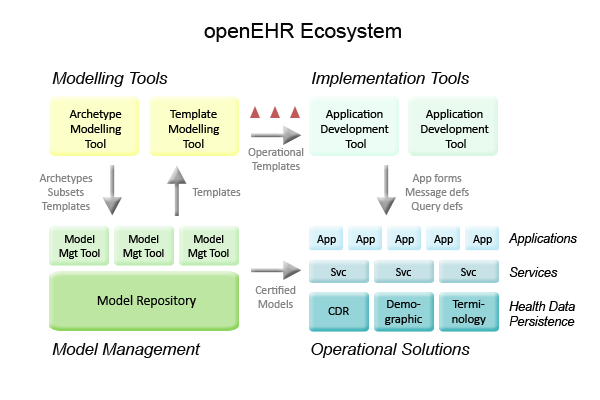
<style>
.page{position:relative;width:600px;height:400px;background:#ffffff}
.page>*{position:absolute;margin:0}
.t1{font:20.8px "ArialMT";color:#060606}
.t2{font:16.7px "Arial-ItalicMT";color:#060606}
.t3{font:12.5px "Calibri";color:#000000}
.t4{font:11.7px "Calibri";color:#848484}
.t5{font:12.5px "Arial-ItalicMT";color:#000000}
.t6{font:11.7px "Calibri";color:#000000}
.t7{font:13.8px "Calibri";color:#000000}
</style>
<div class="page">
<p class="t1" style="left:204px;top:23px;width:197px;height:19px">openEHR Ecosystem</p>
<p class="t2" style="left:52px;top:72px;width:116px;height:15px">Modelling Tools</p>
<p class="t2" style="left:312px;top:72px;width:157px;height:15px">Implementation Tools</p>
<p class="t3" style="left:69px;top:109px;width:53px;height:39px;text-align:center">Archetype<br>Modelling<br>Tool</p>
<p class="t3" style="left:169px;top:109px;width:51px;height:39px;text-align:center">Template<br>Modelling<br>Tool</p>
<p class="t3" style="left:321px;top:109px;width:68px;height:39px;text-align:center">Application<br>Development<br> Tool</p>
<p class="t3" style="left:421px;top:109px;width:68px;height:39px;text-align:center">Application<br>Development<br> Tool</p>
<p class="t4" style="left:248px;top:148px;width:56px;height:24px;text-align:center">Operational<br>Templates</p>
<p class="t4" style="left:39px;top:174px;width:54px;height:38px;text-align:center">Archetypes Subsets<br>Templates</p>
<p class="t4" style="left:405px;top:174px;width:64px;height:38px;text-align:center">App forms<br>Message defs<br>Query defs</p>
<p class="t4" style="left:192px;top:188px;width:49px;height:10px">Templates</p>
<p class="t5" style="left:508px;top:233px;width:69px;height:13px">Applications</p>
<p class="t6" style="left:59px;top:235px;width:41px;height:24px;text-align:center">Model<br>Mgt Tool</p>
<p class="t6" style="left:123px;top:235px;width:41px;height:24px;text-align:center">Model<br>Mgt Tool</p>
<p class="t6" style="left:188px;top:235px;width:41px;height:24px;text-align:center">Model<br>Mgt Tool</p>
<p class="t6" style="left:317px;top:235px;width:19px;height:10px">App</p>
<p class="t6" style="left:356px;top:235px;width:19px;height:10px">App</p>
<p class="t6" style="left:395px;top:235px;width:19px;height:10px">App</p>
<p class="t6" style="left:434px;top:235px;width:19px;height:10px">App</p>
<p class="t6" style="left:473px;top:235px;width:19px;height:10px">App</p>
<p class="t6" style="left:331px;top:268px;width:15px;height:8px">Svc</p>
<p class="t6" style="left:396px;top:268px;width:15px;height:8px">Svc</p>
<p class="t6" style="left:461px;top:268px;width:15px;height:8px">Svc</p>
<p class="t5" style="left:509px;top:267px;width:49px;height:10px">Services</p>
<p class="t4" style="left:255px;top:286px;width:41px;height:22px;text-align:center">Certified Models</p>
<p class="t7" style="left:97px;top:295px;width:99px;height:13px">Model Repository</p>
<p class="t3" style="left:385px;top:300px;width:37px;height:25px;text-align:center">Demo-<br>graphic</p>
<p class="t3" style="left:452px;top:300px;width:34px;height:25px;text-align:center">Termi-<br>nology</p>
<p class="t5" style="left:509px;top:301px;width:66px;height:25px">Health Data<br>Persistence</p>
<p class="t3" style="left:328px;top:307px;width:21px;height:8px">CDR</p>
<p class="t2" style="left:52px;top:343px;width:149px;height:15px">Model Management</p>
<p class="t2" style="left:311px;top:343px;width:159px;height:15px">Operational Solutions</p>
</div>
